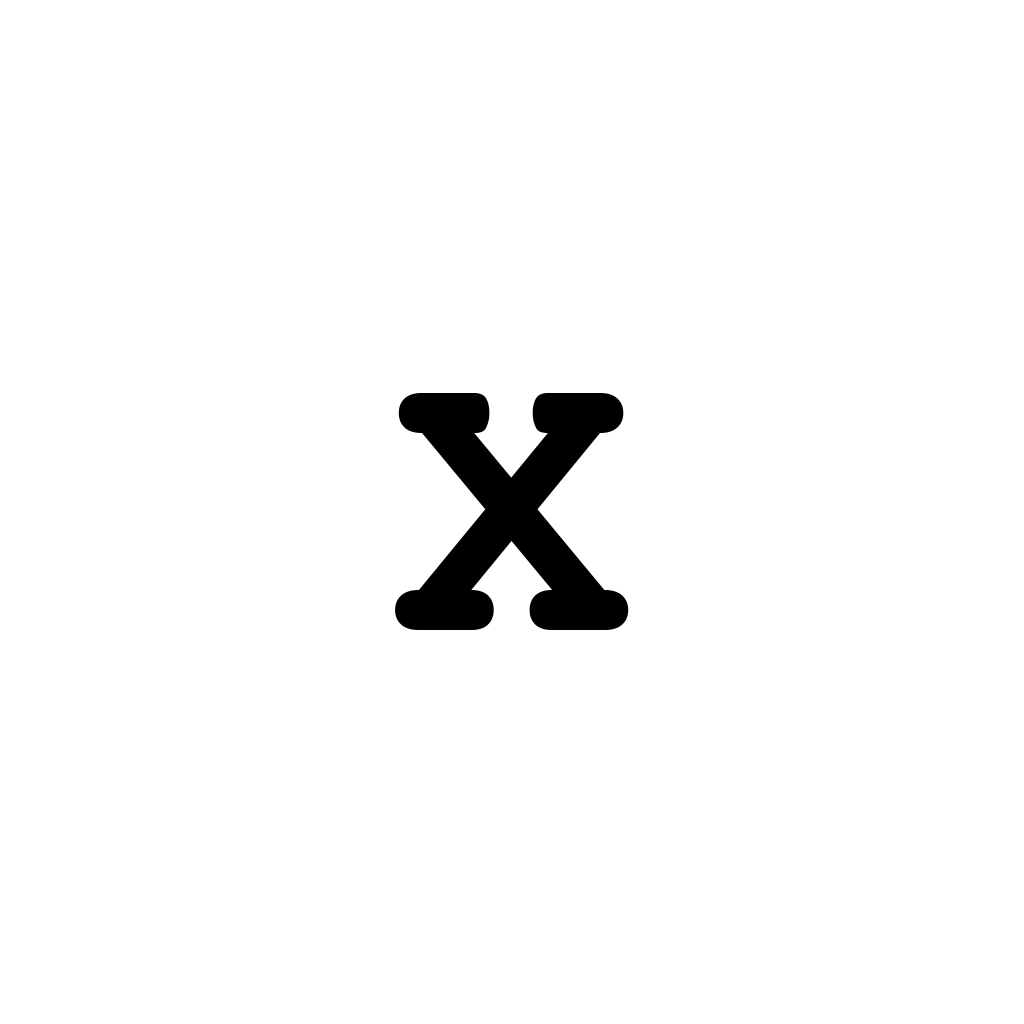
<style>
.page{position:relative;width:1024px;height:1024px;background:#ffffff}
.page>*{position:absolute;margin:0}
.t1{font:400px "CourierNewPS-BoldMT";color:#000000}
</style>
<div class="page">
<p class="t1" style="left:395px;top:393px;width:234px;height:237px">X</p>
</div>
